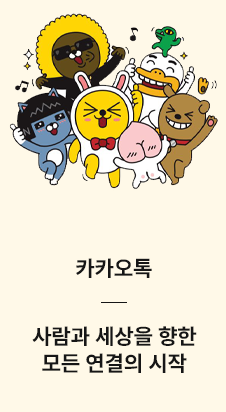
<style>
.page{position:relative;width:226px;height:412px;background:#fff9e8}
.page>*{position:absolute;margin:0}
.t1{font:22px "Pretendard-Bold";letter-spacing:0.01em;color:#161616}
</style>
<div class="page">
<p class="t1" style="left:76px;top:258px;width:76px;height:20px">카카오톡</p>
<p class="t1" style="left:32px;top:326px;width:165px;height:47px;text-align:center">사람과 세상을 향한<br>모든 연결의 시작</p>
</div>
